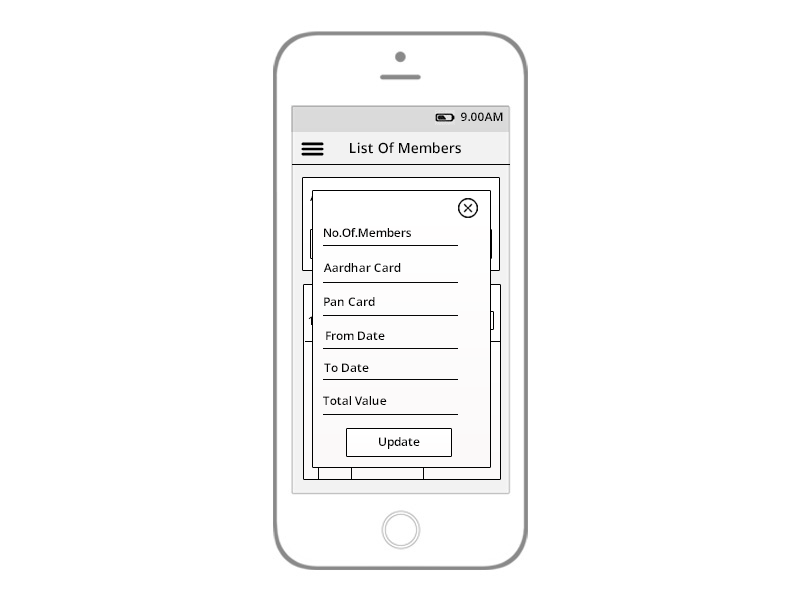
<style>
.page{position:relative;width:800px;height:600px;background:#ffffff}
.page>*{position:absolute;margin:0}
.t1{font:12px "OpenSans-Semibold";color:#030303}
.t2{font:14px "OpenSans-Semibold";color:#030303}
</style>
<div class="page">
<p class="t1" style="left:461px;top:112px;width:42px;height:9px">9.00AM</p>
<p class="t2" style="left:350px;top:142px;width:111px;height:12px">List Of Members</p>
<p class="t1" style="left:324px;top:228px;width:87px;height:9px">No.Of.Members</p>
<p class="t1" style="left:323px;top:263px;width:78px;height:9px">Aardhar Card</p>
<p class="t1" style="left:324px;top:297px;width:51px;height:9px">Pan Card</p>
<p class="t1" style="left:308px;top:316px;width:5px;height:9px">1</p>
<p class="t1" style="left:326px;top:331px;width:59px;height:9px">From Date</p>
<p class="t1" style="left:324px;top:363px;width:45px;height:9px">To Date</p>
<p class="t1" style="left:323px;top:396px;width:64px;height:9px">Total Value</p>
<p class="t1" style="left:379px;top:437px;width:41px;height:12px">Update</p>
</div>
